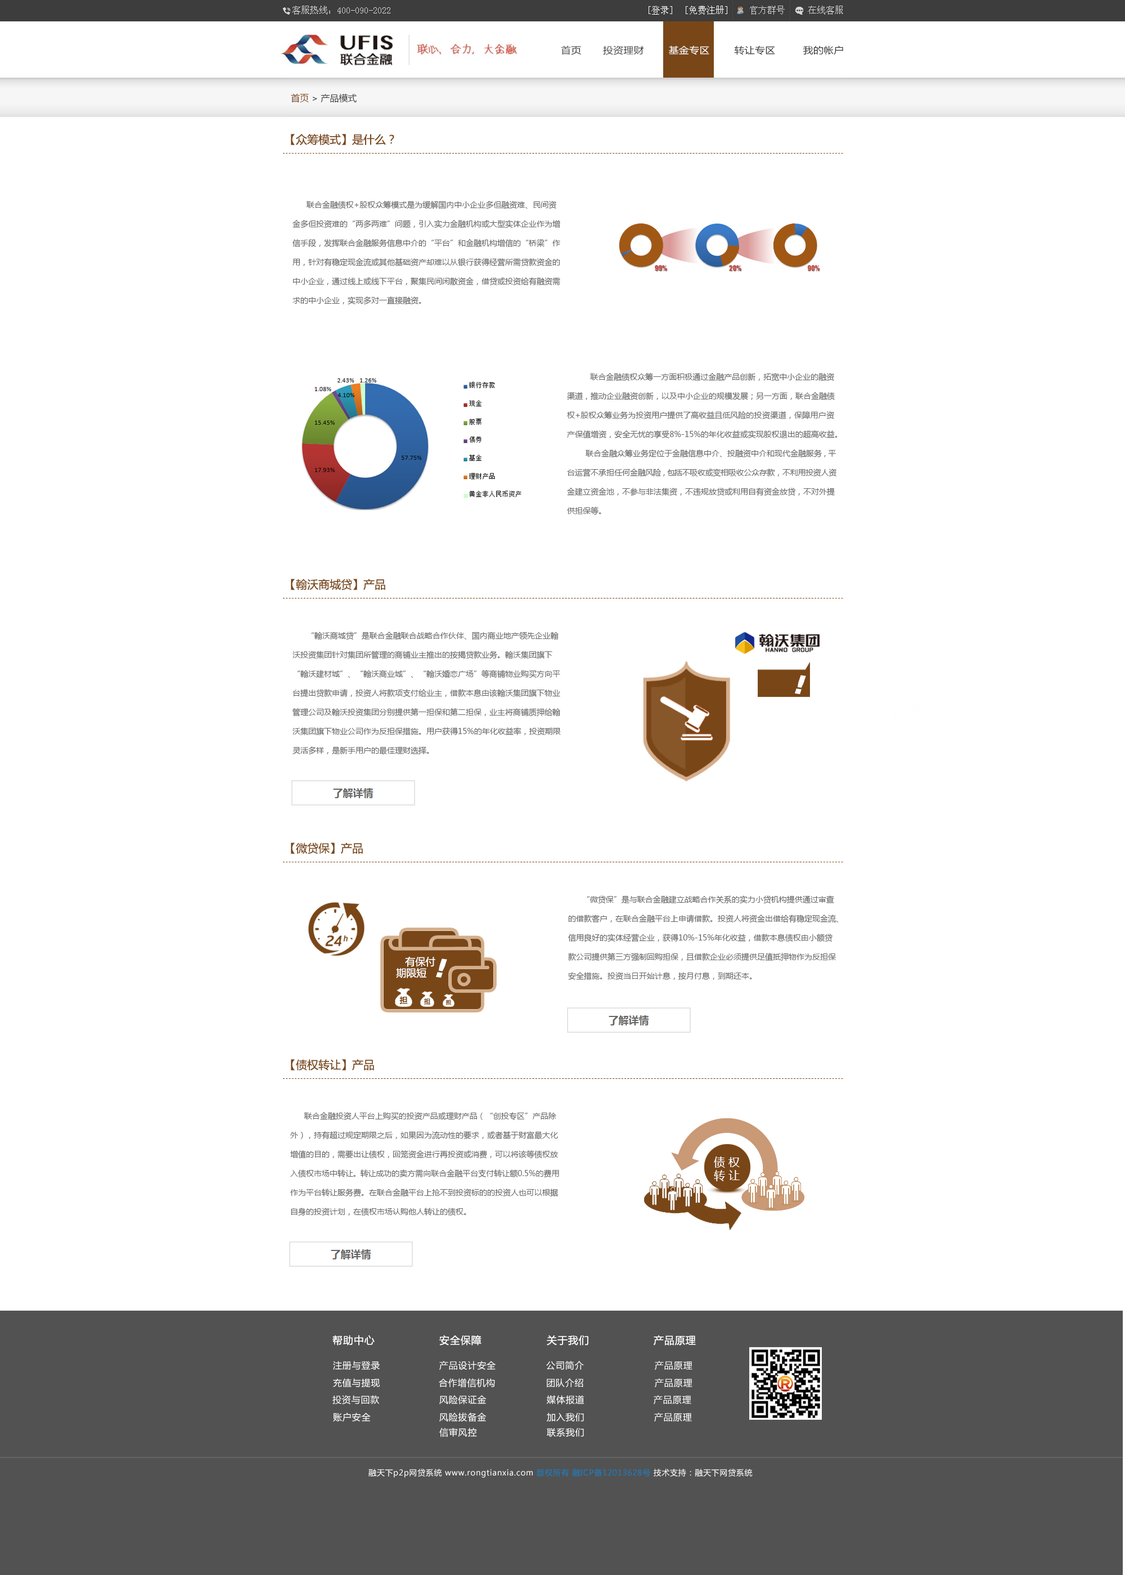
<style>
.page{position:relative;width:1125px;height:1575px;background:#ffffff}
.page>*{position:absolute;margin:0}
.t1{font:9px "SimSun";color:#d6d6d6}
.t2{font:9px "SimSun";color:#fefefe}
.t3{font:9px "SimSun";color:#fffefe}
.t4{font:9.1px "MicrosoftYaHei";letter-spacing:0.01em;color:#333333;scale:1.11 1}
.t5{font:9.1px "MicrosoftYaHei";letter-spacing:0.01em;color:#fffefe;scale:1.11 1}
.t6{font:9px "MicrosoftYaHei";color:#3b3a3a}
.t7{font:9px "MicrosoftYaHei";color:#794617}
.t8{font:11.2px "MicrosoftYaHei";color:#794617}
.t9{font:7.9px/19.1px "MicrosoftYaHei";color:#666666}
.t10{font:7.9px/19.1px "MicrosoftYaHei";letter-spacing:0.02em;color:#666666}
.t11{font:7.9px/19.1px "MicrosoftYaHei";letter-spacing:-0.1em;color:#666666}
.t12{font:7.9px/19.1px "MicrosoftYaHei";letter-spacing:-0.02em;color:#666666}
.t13{font:25.9px "hzgb";letter-spacing:0.075em;color:#fffefe;font-style:italic}
.t14{font:25.9px "hzgb";letter-spacing:0.075em;color:#fffefe}
.t15{font:10.1px/11.2px "MicrosoftYaHei";color:#fffefe}
.t16{font:7.8px "MicrosoftYaHei";color:#794617;font-weight:bold}
.t17{font:6.5px "MicrosoftYaHei";color:#794617;font-weight:bold;scale:0.97 1}
.t18{font:5.3px "MicrosoftYaHei";color:#794617;font-weight:bold}
.t19{font:7.9px/19.1px "MicrosoftYaHei";letter-spacing:-0.04em;color:#666666}
.t20{font:11.2px/13.5px "MicrosoftYaHei";color:#ffffff}
.t21{font:10.1px "MicrosoftYaHei";letter-spacing:0.05em;color:#ffffff}
.t22{font:9px "MicrosoftYaHei";letter-spacing:0.05em;color:#ffffff}
.t23{font:7.9px "MicrosoftYaHei";letter-spacing:0.05em;color:#ffffff}
.t24{font:7.9px "MicrosoftYaHei";letter-spacing:0.05em;color:#147fc3}
</style>
<div class="page">
<p class="t1" style="left:292px;top:6px;width:98px;height:9px">客服热线：400-090-2022</p>
<p class="t2" style="left:649px;top:6px;width:23px;height:9px">[登录]</p>
<p class="t3" style="left:686px;top:6px;width:41px;height:9px">[免费注册]</p>
<p class="t1" style="left:750px;top:6px;width:93px;height:9px">官方群号     在线客服</p>
<p class="t4" style="left:561px;top:46px;width:282px;height:9px">首页       投资理财        <span class="t5">基金专区</span>        转让专区         我的帐户</p>
<p class="t6" style="left:291px;top:93px;width:66px;height:10px"><span class="t7">首页 </span>&gt; 产品模式</p>
<p class="t8" style="left:291px;top:134px;width:103px;height:11px">【众筹模式】是什么？</p>
<p class="t9" style="left:292px;top:201px;width:268px;height:104px">联合金融债权+股权众筹模式是为缓解国内中小企业多但融资难、民间资<br>金多但投资难的“两多两难”问题，引入实力金融机构或大型实体企业作为增<br>信手段，发挥联合金融服务信息中介的“平台”和金融机构增信的“桥梁”作<br>用，针对有稳定现金流或其他基础资产却难以从银行获得经营所需贷款资金的<br>中小企业，通过线上或线下平台，聚集民间闲散资金，借贷或投资给有融资需<br>求的中小企业，实现多对一直接融资。</p>
<p class="t9" style="left:567px;top:373px;width:271px;height:142px">联合金融债权众筹一方面积极通过金融产品创新，拓宽中小企业的融资<br>渠道，推动企业融资创新，以及中小企业的规模发展；另一方面，联合金融债<br>权+股权众筹业务为投资用户提供了高收益且低风险<span class="t10">的投资渠道，保障用户资<br>产</span>保值增资，安全无忧的享受8%-15%的年化收益或实现股权退出的超高收益。<br>        联合金融众筹业务定位于金融信息中介、投融资中介和现代金融服<span class="t11">务，平<br></span>台运营不承担任何<span class="t12">金融风</span><span class="t11">险，包</span><span class="t12">括不吸收或变相吸收公众存款，不利用投资人资<br></span>金建立资金池，不参与非法集资，不违规放贷或利用自有资金放贷，不对外提<br>供担保等。</p>
<p class="t8" style="left:291px;top:579px;width:94px;height:11px">【翰沃商城贷】产品</p>
<p class="t9" style="left:292px;top:632px;width:269px;height:123px">“翰沃商城贷”是联合金融联合战略合作伙伴、国内商业地产领先企业翰<br>沃投资集团针对集团所管理的商铺业主推出的按揭贷款业务。翰沃集团旗下<br>“翰沃建材城”、“翰沃商业城”、“翰沃婚恋广场”等商铺物业购买方向平<br>台提出贷款申请，投资人将款项支付给业主，借款本息由该翰沃集团旗下物业<br>管理公司及翰沃投资集团分别提供第一担保和第二担保，业主将商铺质押给翰<br>沃集团旗下物业公司作为反担保措施。用户获得15%的年化收益率，投资期限<br>灵活多样，是新手用户的最佳理财选择。</p>
<p class="t13" style="left:795px;top:675px;width:11px;height:19px;rotate:8deg"><span class="t14"> </span>！</p>
<p class="t8" style="left:291px;top:843px;width:72px;height:11px">【微贷保】产品</p>
<p class="t9" style="left:568px;top:896px;width:271px;height:84px">“微贷保”是与联合金融建立战略合作关系的实力小贷机构提供通过审查<br>的借款客户，在联合金融平台上申请借款。投资人将资金出借给有稳定现金流、<br>信用良好的实体经营企业，获得10%-15%年化收益，借款本息债权由小额贷<br>款公司提供第三方强制回购担保，且借款企业必须提供足值抵押物作为反担保<br>安全措施。投资当日开始计息，按月付息，到期还本。</p>
<p class="t15" style="left:396px;top:956px;width:39px;height:22px">有保付<br> 期限短</p>
<p class="t13" style="left:436px;top:958px;width:11px;height:20px;rotate:8deg"><span class="t14"> </span>！</p>
<p class="t16" style="left:399px;top:996px;width:9px;height:8px">担</p>
<p class="t17" style="left:424px;top:998px;width:6px;height:7px">担</p>
<p class="t18" style="left:446px;top:1000px;width:6px;height:5px">担</p>
<p class="t8" style="left:291px;top:1059px;width:83px;height:11px">【债权转让】产品</p>
<p class="t9" style="left:290px;top:1112px;width:269px;height:104px">联合金融投资人平台上购买的投资产品或理财产品（“创投专区”产品除<br>外），持有超过规定期限之后，如果因为流动性的要求，或者基于财富最大化<br>增值的目的，需要出让债权，回笼资金进行再投资或消费，可以将该等债权放<br>入债权市场中转<span class="t19">让。转</span>让成功的卖方需向联合金融平台支付转让额0.5%的费用<br>作为平台转让服务费。在联合金融平台上抢不到投资标的的投资人也可以根据<br>自身的投资计划，在债权市场认购他人转让的债权。</p>
<p class="t20" style="left:714px;top:1156px;width:26px;height:25px">债 权<br>转 让</p>
<p class="t21" style="left:332px;top:1335px;width:43px;height:11px">帮助中心</p>
<p class="t21" style="left:439px;top:1335px;width:43px;height:11px">安全保障</p>
<p class="t21" style="left:547px;top:1335px;width:41px;height:11px">关于我们</p>
<p class="t21" style="left:654px;top:1335px;width:42px;height:11px">产品原理</p>
<p class="t22" style="left:333px;top:1361px;width:47px;height:9px">注册与登录</p>
<p class="t22" style="left:439px;top:1361px;width:57px;height:9px">产品设计安全</p>
<p class="t22" style="left:546px;top:1361px;width:38px;height:9px">公司简介</p>
<p class="t22" style="left:655px;top:1361px;width:37px;height:9px">产品原理</p>
<p class="t22" style="left:333px;top:1378px;width:47px;height:10px">充值与提现</p>
<p class="t22" style="left:439px;top:1378px;width:56px;height:10px">合作增信机构</p>
<p class="t22" style="left:547px;top:1378px;width:36px;height:10px">团队介绍</p>
<p class="t22" style="left:655px;top:1378px;width:37px;height:10px">产品原理</p>
<p class="t22" style="left:332px;top:1395px;width:47px;height:10px">投资与回款</p>
<p class="t22" style="left:439px;top:1395px;width:48px;height:10px">风险保证金</p>
<p class="t22" style="left:546px;top:1395px;width:38px;height:10px">媒体报道</p>
<p class="t22" style="left:654px;top:1395px;width:37px;height:10px">产品原理</p>
<p class="t22" style="left:333px;top:1412px;width:38px;height:10px">账户安全</p>
<p class="t22" style="left:439px;top:1412px;width:48px;height:10px">风险拔备金</p>
<p class="t22" style="left:547px;top:1412px;width:37px;height:10px">加入我们</p>
<p class="t22" style="left:654px;top:1412px;width:38px;height:10px">产品原理</p>
<p class="t22" style="left:439px;top:1428px;width:38px;height:9px">信审风控</p>
<p class="t22" style="left:547px;top:1428px;width:37px;height:9px">联系我们</p>
<p class="t23" style="left:368px;top:1469px;width:385px;height:9px">融天下p2p网贷系统 www.rongtianxia.com <span class="t24">版权所有 融ICP备12013628号</span> 技术支持：融天下网贷系统</p>
</div>
